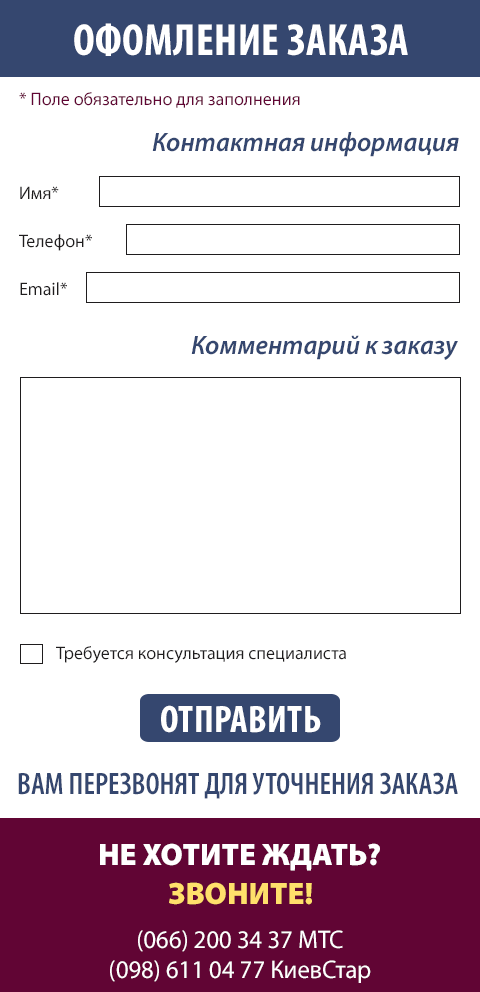
<style>
.page{position:relative;width:480px;height:992px;background:#ffffff}
.page>*{position:absolute;margin:0}
.t1{font:45.1px "MyriadPro-BoldCond";letter-spacing:0.01em;color:#ffffff}
.t2{font:18px "MyriadPro-Regular";color:#610534}
.t3{font:26.7px "MyriadPro-SemiboldIt";color:#35476f}
.t4{font:18px/48px "MyriadPro-Regular";color:#1f1d1e}
.t5{font:18px "MyriadPro-Regular";color:#1f1d1e}
.t6{font:38.5px "MyriadPro-BoldCond";letter-spacing:0.01em;color:#ffffff}
.t7{font:31.3px "MyriadPro-SemiboldCond";color:#35476f}
.t8{font:31.3px "MyriadPro-Black";color:#ffffff}
.t9{font:31.3px "MyriadPro-Black";color:#ffe06b}
.t10{font:25.4px "MyriadPro-Regular";color:#ffffff}
</style>
<div class="page">
<p class="t1" style="left:74px;top:23px;width:334px;height:33px">ОФОМЛЕНИЕ ЗАКАЗА</p>
<p class="t2" style="left:19px;top:92px;width:281px;height:16px">* Поле обязательно для заполнения</p>
<p class="t3" style="left:152px;top:132px;width:307px;height:25px">Контактная информация</p>
<p class="t4" style="left:19px;top:186px;width:73px;height:110px">Имя*<br>Телефон*<br>Email*</p>
<p class="t3" style="left:191px;top:335px;width:267px;height:25px">Комментарий к заказу</p>
<p class="t5" style="left:56px;top:646px;width:290px;height:17px">Требуется консультация специалиста</p>
<p class="t6" style="left:161px;top:705px;width:160px;height:28px">ОТПРАВИТЬ</p>
<p class="t7" style="left:18px;top:772px;width:440px;height:27px">ВАМ ПЕРЕЗВОНЯТ ДЛЯ УТОЧНЕНИЯ ЗАКАЗА</p>
<p class="t8" style="left:100px;top:843px;width:280px;height:28px">НЕ ХОТИТЕ ЖДАТЬ?</p>
<p class="t9" style="left:169px;top:882px;width:143px;height:23px">ЗВОНИТЕ!</p>
<p class="t10" style="left:110px;top:930px;width:261px;height:53px;text-align:center">(066) 200 34 37 МТС<br>(098) 611 04 77 КиевСтар</p>
</div>
